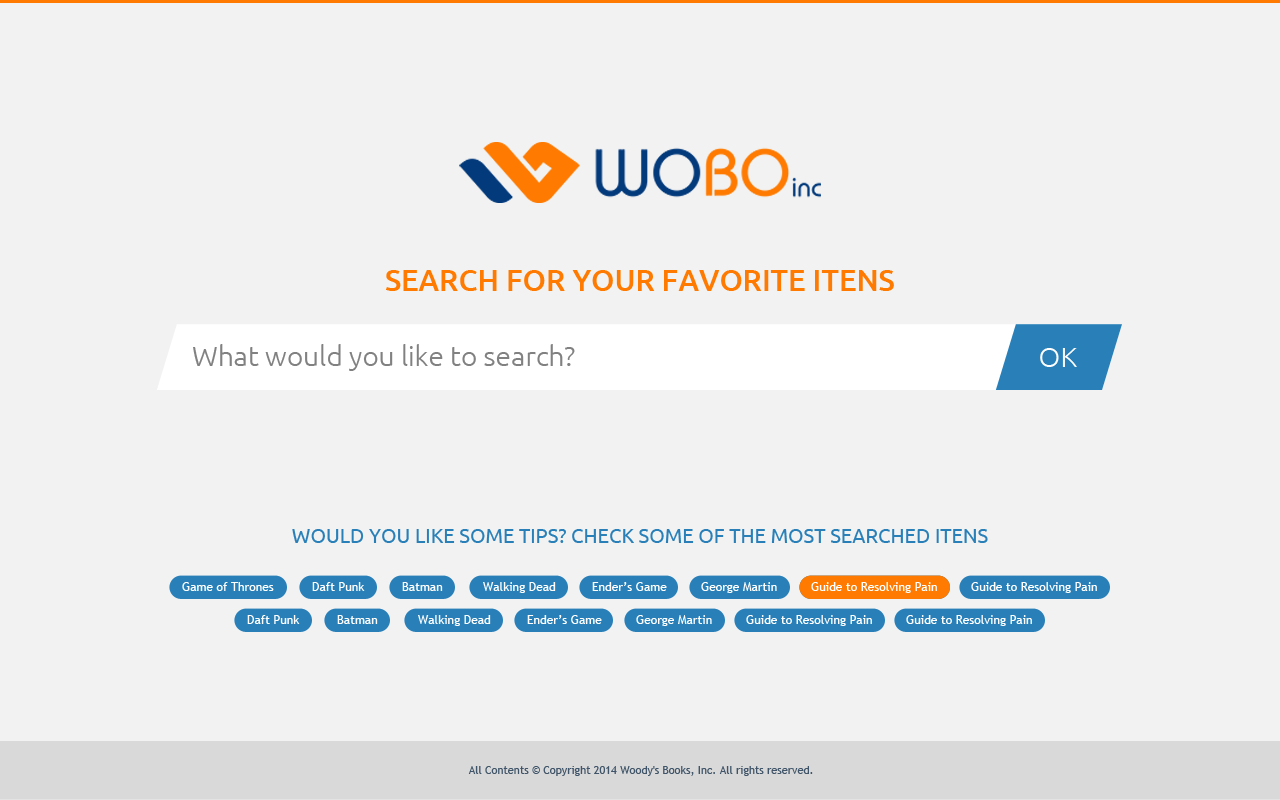
<style>
.page{position:relative;width:1280px;height:800px;background:#f2f2f2}
.page>*{position:absolute;margin:0}
.t1{font:30px "Ubuntu-Medium";color:#fe7a00;text-transform:uppercase}
.t2{font:28px "Ubuntu-Light";color:#818181}
.t3{font:28px "Ubuntu-Light";color:#ffffff;text-transform:uppercase}
.t4{font:20px "Ubuntu";color:#2980b9;text-transform:uppercase}
.t5{font:12px "TrebuchetMS";color:#ffffff}
.t6{font:11px "TrebuchetMS";color:#405569}
</style>
<div class="page">
<p class="t1" style="left:386px;top:270px;width:508px;height:21px">Search for your favorite itens</p>
<p class="t2" style="left:193px;top:344px;width:382px;height:27px">What would you like to search?</p>
<p class="t3" style="left:1040px;top:348px;width:37px;height:19px">Ok</p>
<p class="t4" style="left:292px;top:529px;width:696px;height:14px">Would you like some tips? Check some of the most searched itens</p>
<p class="t5" style="left:182px;top:582px;width:92px;height:9px">Game of Thrones</p>
<p class="t5" style="left:312px;top:582px;width:53px;height:9px">Daft Punk</p>
<p class="t5" style="left:402px;top:582px;width:41px;height:9px">Batman</p>
<p class="t5" style="left:483px;top:582px;width:73px;height:11px">Walking Dead</p>
<p class="t5" style="left:592px;top:582px;width:75px;height:9px">Ender’s Game</p>
<p class="t5" style="left:701px;top:582px;width:76px;height:11px">George Martin</p>
<p class="t5" style="left:811px;top:582px;width:126px;height:11px">Guide to Resolving Pain</p>
<p class="t5" style="left:971px;top:582px;width:126px;height:11px">Guide to Resolving Pain</p>
<p class="t5" style="left:247px;top:615px;width:53px;height:9px">Daft Punk</p>
<p class="t5" style="left:337px;top:615px;width:41px;height:9px">Batman</p>
<p class="t5" style="left:418px;top:615px;width:73px;height:11px">Walking Dead</p>
<p class="t5" style="left:527px;top:615px;width:75px;height:9px">Ender’s Game</p>
<p class="t5" style="left:636px;top:615px;width:76px;height:11px">George Martin</p>
<p class="t5" style="left:746px;top:615px;width:126px;height:11px">Guide to Resolving Pain</p>
<p class="t5" style="left:906px;top:615px;width:126px;height:11px">Guide to Resolving Pain</p>
<p class="t6" style="left:468px;top:766px;width:345px;height:10px">All Contents © Copyright 2014 Woody's Books, Inc. All rights reserved.</p>
</div>
